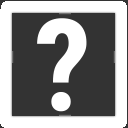
<style>
.page{position:relative;width:128px;height:128px;background:#333333}
.page>*{position:absolute;margin:0}
.t1{font:128px "RobotoCondensed-Bold";color:#ffffff}
</style>
<div class="page">
<p class="t1" style="left:37px;top:18px;width:50px;height:94px">?</p>
</div>
